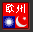
<style>
.page{position:relative;width:33px;height:32px;background:#333333}
.page>*{position:absolute;margin:0}
.t1{font:10.4px "SimSun";color:#ffffff}
</style>
<div class="page">
<p class="t1" style="left:6px;top:4px;width:19px;height:9px">欧州</p>
</div>
